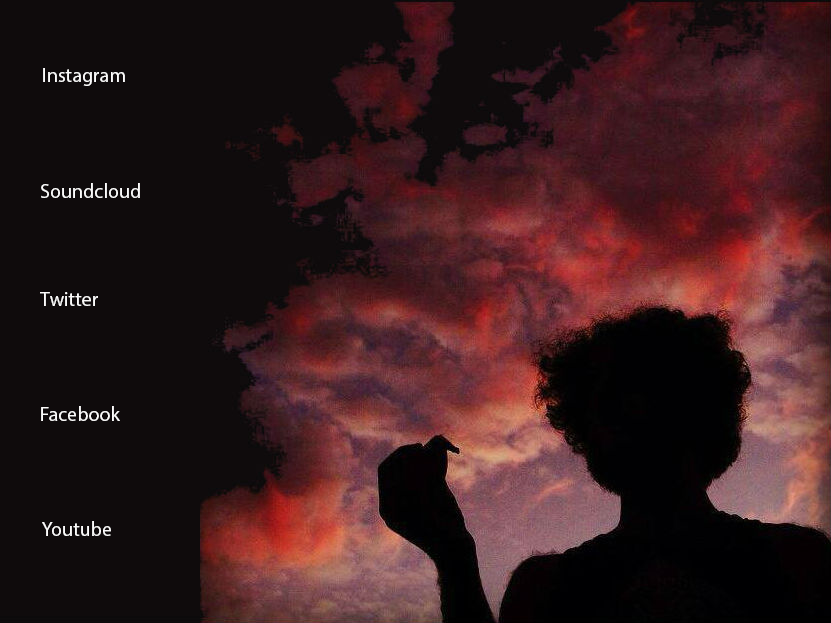
<style>
.page{position:relative;width:831px;height:623px;background:#0f0b0c}
.page>*{position:absolute;margin:0}
.t1{font:20px "MyriadPro-Regular";color:#fbfbfb}
</style>
<div class="page">
<p class="t1" style="left:43px;top:68px;width:82px;height:18px">Instagram</p>
<p class="t1" style="left:41px;top:183px;width:99px;height:15px">Soundcloud</p>
<p class="t1" style="left:40px;top:292px;width:58px;height:14px">Twitter</p>
<p class="t1" style="left:41px;top:406px;width:79px;height:15px">Facebook</p>
<p class="t1" style="left:42px;top:521px;width:69px;height:15px">Youtube</p>
</div>
